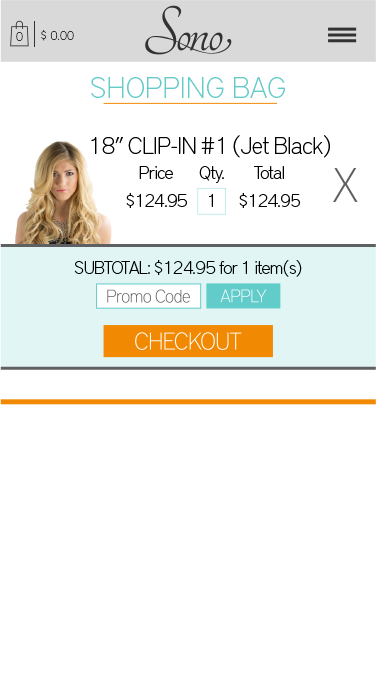
<style>
.page{position:relative;width:376px;height:698px;background:#ffffff}
.page>*{position:absolute;margin:0}
.t1{font:12.4px "DistrictPro-Thin";color:#323232}
.t2{font:30px "DistrictPro-Thin";color:#65cbc9}
.t3{font:24px "DistrictPro-Thin";letter-spacing:-0.031em;color:#000000}
.t4{font:18px/14px "DistrictPro-Thin";letter-spacing:-0.031em;color:#000000}
.t5{font:48px "DistrictPro-Thin";color:#5f6062}
.t6{font:18px "DistrictPro-Thin";letter-spacing:-0.031em;color:#000000}
</style>
<div class="page">
<p class="t1" style="left:41px;top:29px;width:33px;height:12px">$ 0.00</p>
<p class="t1" style="left:16px;top:32px;width:7px;height:9px">0</p>
<p class="t2" style="left:91px;top:77px;width:194px;height:21px">SHOPPING BAG</p>
<p class="t3" style="left:91px;top:135px;width:239px;height:23px">18” CLIP-IN #1 (Jet Black)</p>
<p class="t4" style="left:126px;top:166px;width:61px;height:42px;text-align:center">Price<br><br>$124.95</p>
<p class="t4" style="left:199px;top:166px;width:25px;height:41px;text-align:center">Qty.<br><br>1</p>
<p class="t4" style="left:239px;top:166px;width:61px;height:42px;text-align:center">Total<br><br>$124.95</p>
<p class="t5" style="left:333px;top:168px;width:25px;height:34px">X</p>
<p class="t6" style="left:74px;top:260px;width:228px;height:17px">SUBTOTAL: $124.95 for 1 item(s)</p>
</div>
